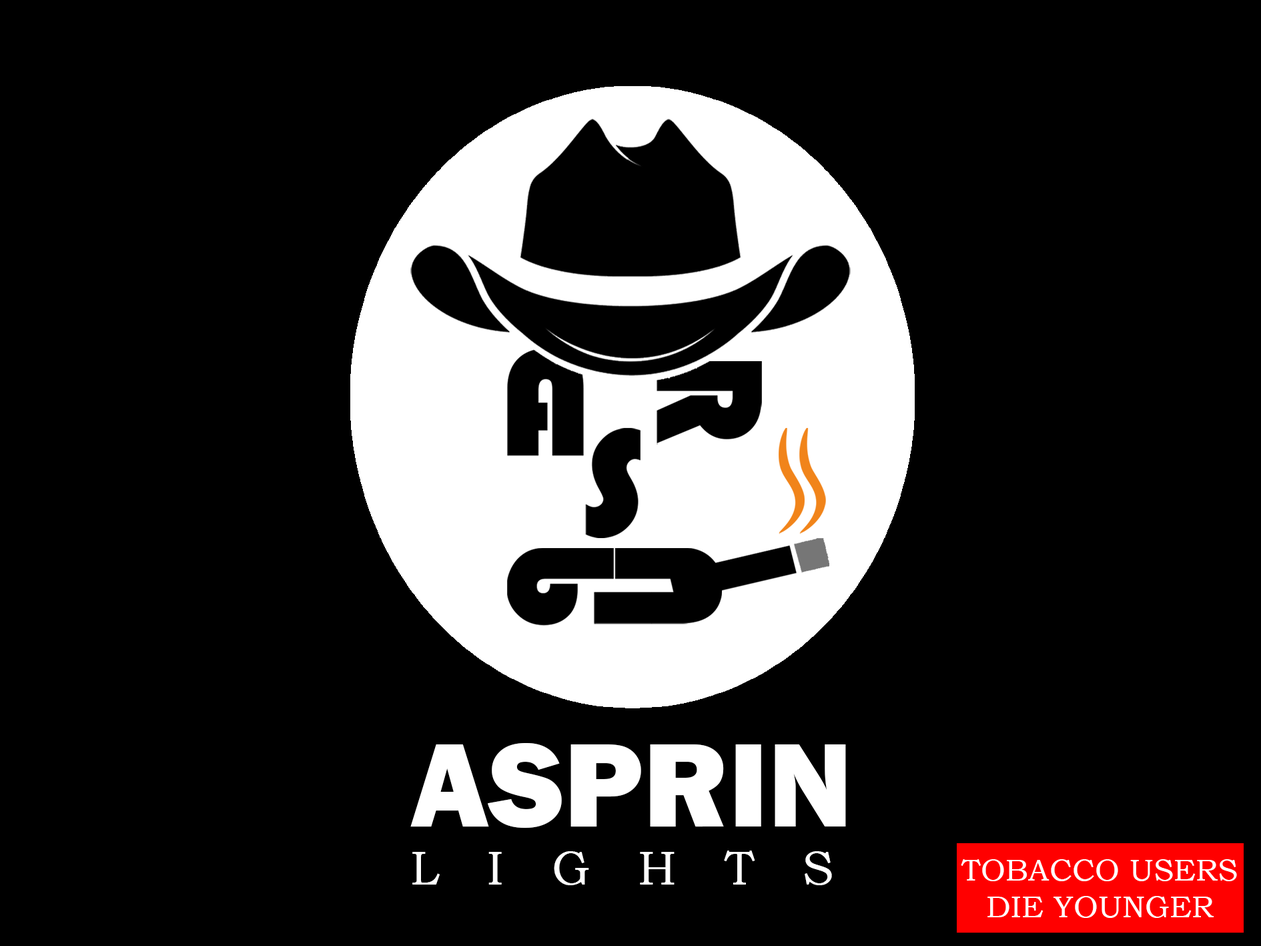
<style>
.page{position:relative;width:1261px;height:946px;background:#000000}
.page>*{position:absolute;margin:0}
.t1{font:123.4px "FranklinGothic-Heavy";color:#ffffff}
.t2{font:48px "BookmanOldStyle";letter-spacing:1em;color:#ffffff}
.t3{font:30.6px "BookmanOldStyle";letter-spacing:0.005em;color:#ffffff}
</style>
<div class="page">
<p class="t1" style="left:410px;top:743px;width:436px;height:142px">ASPRIN <br><span class="t2">LIGHTS</span></p>
<p class="t3" style="left:961px;top:859px;width:276px;height:58px;text-align:center">TOBACCO USERS<br>DIE YOUNGER</p>
</div>
